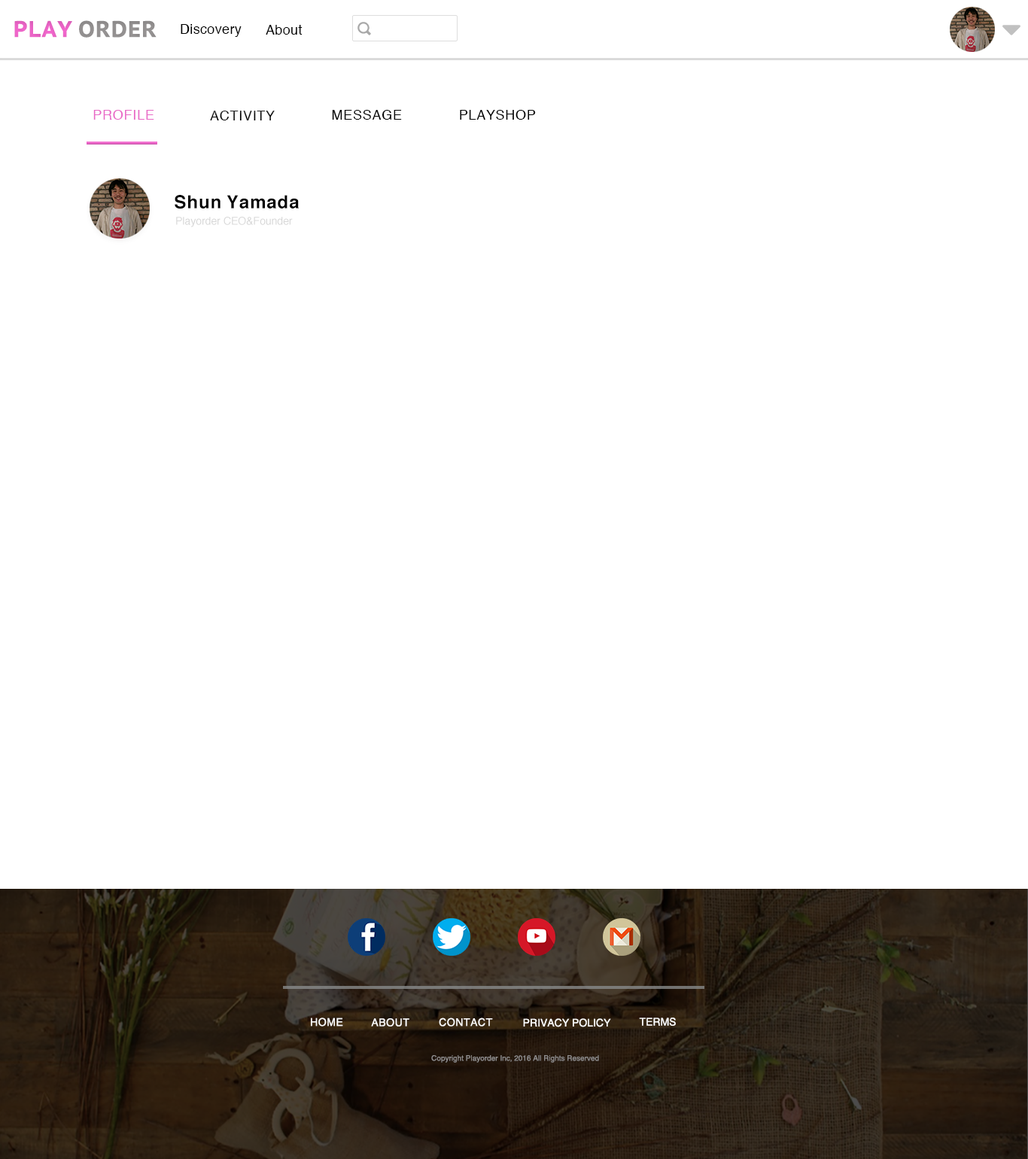
<style>
.page{position:relative;width:1028px;height:1159px;background:#ffffff}
.page>*{position:absolute;margin:0}
.t1{font:22.6px "PTSans-CaptionBold";color:#9d9a9a}
.t2{font:22.6px "PTSans-CaptionBold";color:#fc6bd5}
.t3{font:13.6px "Helvetica";color:#000000}
.t4{font:13.6px "Helvetica";color:#f26ecf}
.t5{font:13.6px "Helvetica"}
.t6{font:18.1px "Helvetica-Bold";color:#000000}
.t7{font:10.5px "Helvetica";color:#d8d8d8}
.t8{font:10.5px "Helvetica";color:#ffffff}
.t9{font:7.5px "Helvetica";color:#8f8d8d}
</style>
<div class="page">
<p class="t1" style="left:14px;top:20px;width:143px;height:18px"><span class="t2">PLAY </span>ORDER</p>
<p class="t3" style="left:181px;top:24px;width:61px;height:13px">Discovery</p>
<p class="t3" style="left:266px;top:25px;width:37px;height:10px">About</p>
<p class="t4" style="left:93px;top:110px;width:61px;height:10px">PROFILE</p>
<p class="t5" style="left:210px;top:111px;width:65px;height:9px">ACTIVITY</p>
<p class="t3" style="left:332px;top:110px;width:70px;height:10px">MESSAGE</p>
<p class="t3" style="left:460px;top:110px;width:76px;height:10px">PLAYSHOP</p>
<p class="t6" style="left:175px;top:195px;width:124px;height:14px">Shun Yamada</p>
<p class="t7" style="left:176px;top:217px;width:117px;height:10px">Playorder CEO&amp;Founder</p>
<p class="t8" style="left:311px;top:1018px;width:32px;height:9px">HOME</p>
<p class="t8" style="left:371px;top:1019px;width:39px;height:8px">ABOUT</p>
<p class="t8" style="left:439px;top:1018px;width:54px;height:9px">CONTACT</p>
<p class="t8" style="left:523px;top:1019px;width:88px;height:9px">PRIVACY POLICY</p>
<p class="t8" style="left:639px;top:1018px;width:37px;height:8px">TERMS</p>
<p class="t9" style="left:431px;top:1056px;width:168px;height:7px">Copyright Playorder Inc, 2016 All Rights Reserved</p>
</div>
